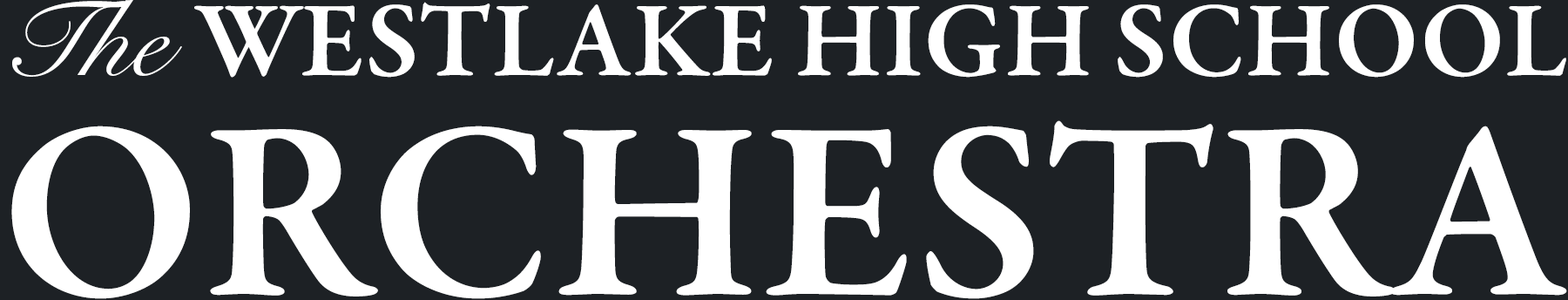
<style>
.page{position:relative;width:1568px;height:300px;background:#1d2125}
.page>*{position:absolute;margin:0}
.t1{font:107.9px "GaramondPremrPro-Smbd";color:#ffffff}
.t2{font:107.9px "SnellRoundhandLTStd-Scr";color:#ffffff}
.t3{font:257.2px "GaramondPremrPro-Smbd";color:#ffffff}
</style>
<div class="page">
<p class="t1" style="left:11px;top:0px;width:1556px;height:299px;text-align:center"><span class="t2">The </span>WESTLAKE HIGH SCHOOL<br><span class="t3">ORCHESTRA</span></p>
</div>
